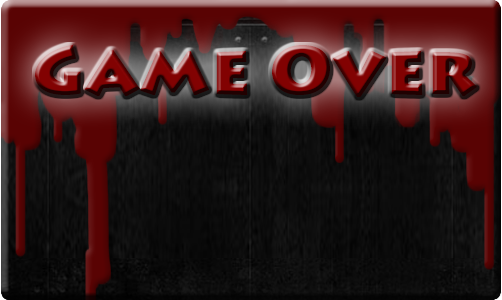
<style>
.page{position:relative;width:502px;height:300px}
.page>*{position:absolute;margin:0}
.t1{font:68.2px "LithosPro-Black";font-weight:bold}
</style>
<div class="page">
<p class="t1" style="left:35px;top:45px;width:442px;height:52px">Game Over</p>
</div>
